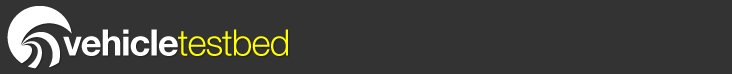
<style>
.page{position:relative;width:732px;height:74px;background:#333333}
.page>*{position:absolute;margin:0}
.t1{font:36.2px "HelveticaNeue-Bold";letter-spacing:-0.025em;color:#ffffff}
.t2{font:36.2px "HelveticaNeue-Light";letter-spacing:-0.025em;color:#ffff00}
</style>
<div class="page">
<p class="t1" style="left:63px;top:29px;width:225px;height:27px">vehicle<span class="t2">testbed</span></p>
</div>
